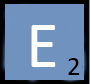
<style>
.page{position:relative;width:91px;height:84px;background:#7092be}
.page>*{position:absolute;margin:0}
.t1{font:66.7px "Calibri";color:#ffffff}
.t2{font:26.7px "Calibri";color:#000000}
</style>
<div class="page">
<p class="t1" style="left:31px;top:25px;width:25px;height:42px">E</p>
<p class="t2" style="left:68px;top:58px;width:12px;height:17px">2</p>
</div>
